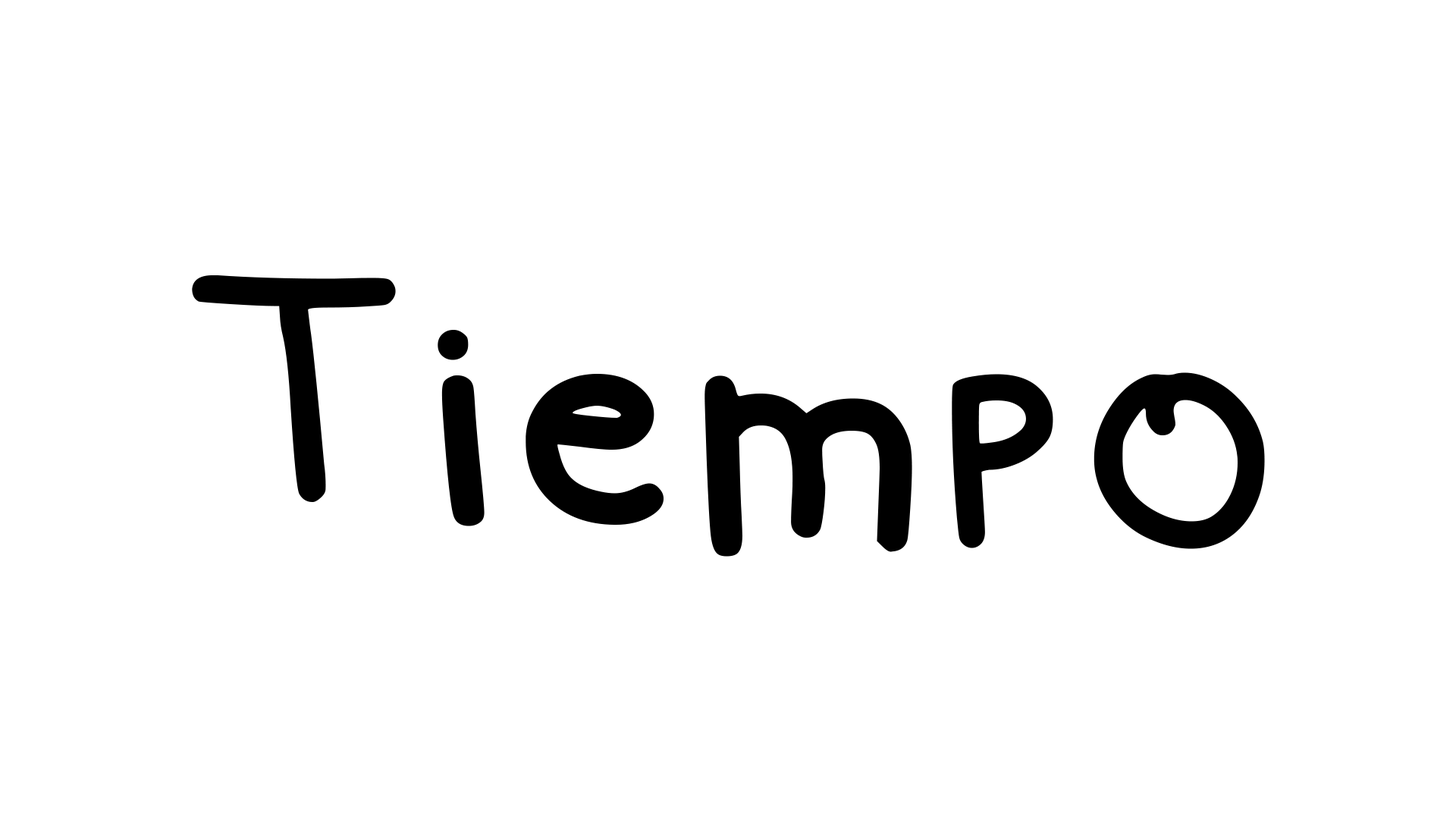
<style>
.page{position:relative;width:1456px;height:819px;background:#ffffff}
.page>*{position:absolute;margin:0}
.t1{font:379.2px "Brutal_bounce-Regular";color:#000000}
</style>
<div class="page">
<p class="t1" style="left:192px;top:275px;width:1073px;height:282px">Tiempo</p>
</div>
